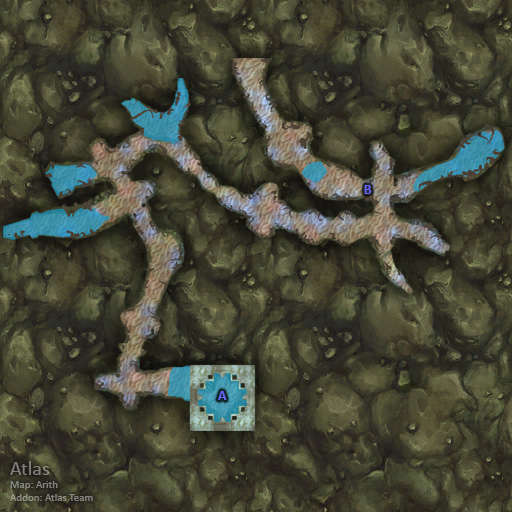
<style>
.page{position:relative;width:512px;height:512px}
.page>*{position:absolute;margin:0}
.t1{font:14px "Calibri-Bold";color:#6666ff}
.t2{font:11px "Calibri";color:#85847f}
.t3{font:20px "Calibri";color:#85847f}
</style>
<div class="page">
<p class="t1" style="left:364px;top:185px;width:8px;height:9px">B</p>
<p class="t1" style="left:218px;top:391px;width:9px;height:9px">A</p>
<p class="t2" style="left:10px;top:461px;width:83px;height:40px"><span class="t3">Atlas<br></span>Map: Arith<br>Addon: Atlas Team</p>
</div>
